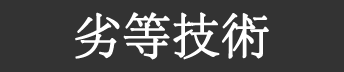
<style>
.page{position:relative;width:344px;height:72px;background:#333333}
.page>*{position:absolute;margin:0}
.t1{font:48px "STSong";color:#ffffff;font-weight:bold}
</style>
<div class="page">
<p class="t1" style="left:75px;top:12px;width:194px;height:48px">劣等技術</p>
</div>
